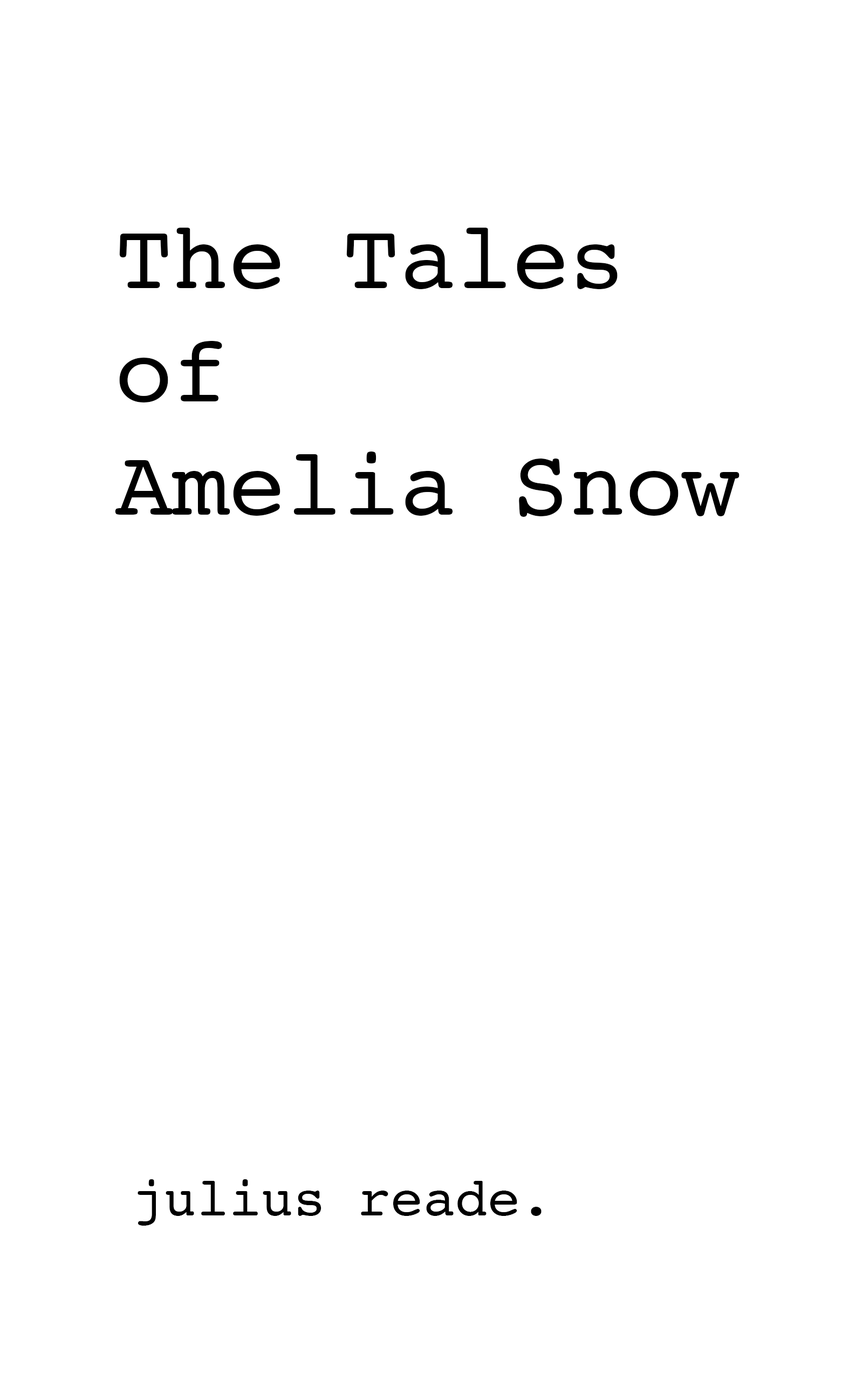
<style>
.page{position:relative;width:863px;height:1381px;background:#ffffff}
.page>*{position:absolute;margin:0}
.t1{font:94.4px "Courier";color:#000000}
.t2{font:54px "Courier";color:#000000}
</style>
<div class="page">
<p class="t1" style="left:115px;top:228px;width:625px;height:289px">The Tales <br>of<br>Amelia Snow</p>
<p class="t2" style="left:138px;top:1179px;width:404px;height:47px">julius reade.</p>
</div>
